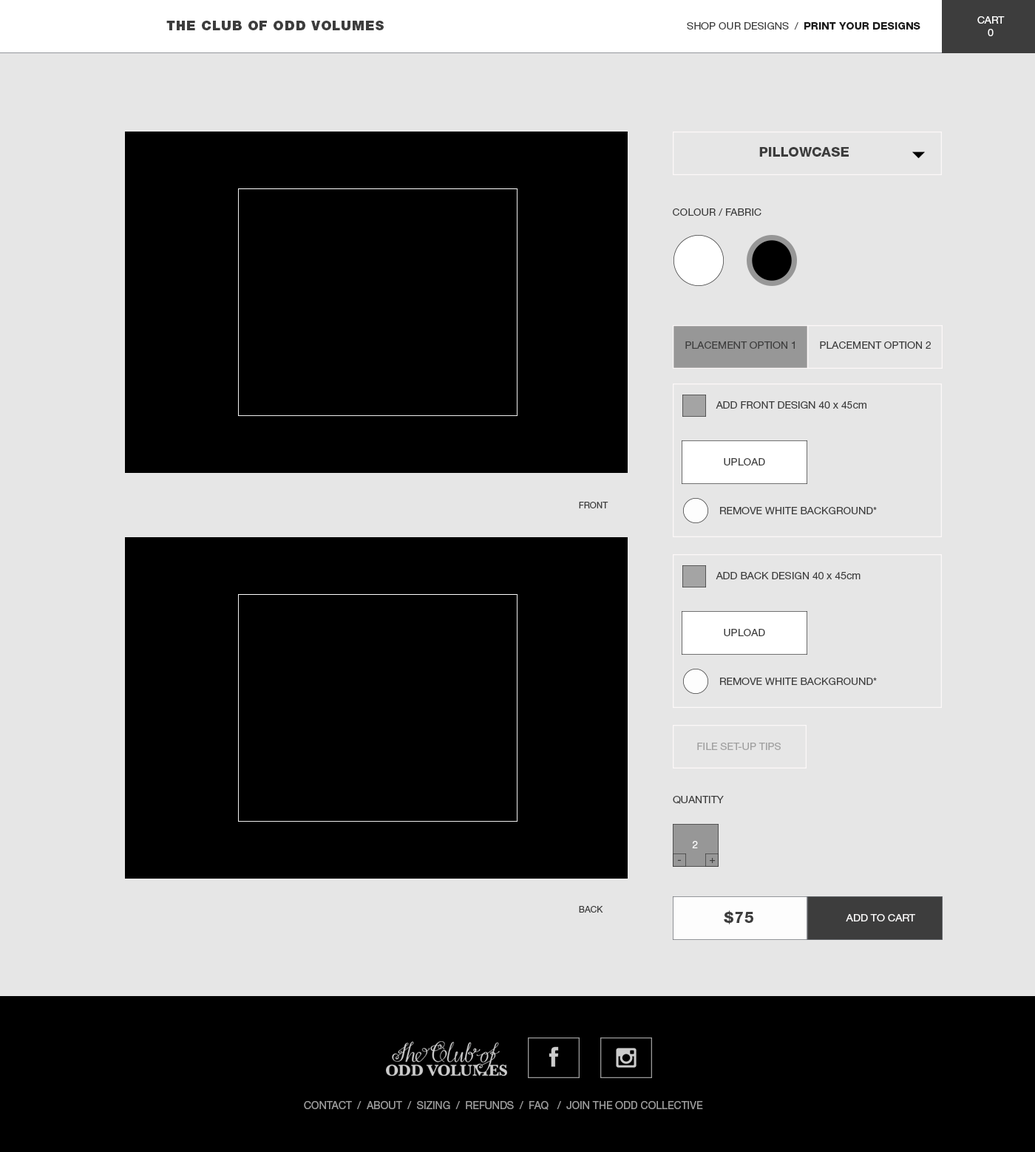
<style>
.page{position:relative;width:1035px;height:1152px;background:#e6e6e6}
.page>*{position:absolute;margin:0}
.t1{font:10.3px "HelveticaNeueLTStd-Roman";color:#ffffff}
.t2{font:13.3px "HelveticaNeueLTStd-Blk";letter-spacing:0.05em;color:#3d3d3d}
.t3{font:10.3px "HelveticaNeueLTStd-Roman";color:#3d3d3d}
.t4{font:10.3px "HelveticaNeueLTStd-Hv";color:#1b1b1b}
.t5{font:13.3px "HelveticaNeueLTStd-Hv";color:#3d3d3d}
.t6{font:10.3px "HelveticaNeueLTStd-Roman";color:#3e3e3e}
.t7{font:8.9px "HelveticaNeueLTStd-Roman";color:#3e3e3e}
.t8{font:10.3px "HelveticaNeueLTStd-Roman";color:#a0a0a0}
.t9{font:10.1px "HelveticaNeueLTStd-Roman";color:#ffffff}
.t10{font:10.1px "HelveticaNeueLTStd-Roman";color:#3e3e3e}
.t11{font:14.8px "HelveticaNeueLTStd-Hv";letter-spacing:0.05em;color:#3d3d3d}
.t12{font:10.3px "HelveticaNeueLTStd-Roman";color:#faf9f9}
.t13{font:10.6px "HelveticaNeueLTStd-Roman";color:#9b9b9b}
</style>
<div class="page">
<p class="t1" style="left:977px;top:16px;width:27px;height:20px;text-align:center">CART<br>0</p>
<p class="t2" style="left:166px;top:21px;width:218px;height:9px">THE CLUB OF ODD VOLUMES</p>
<p class="t3" style="left:687px;top:22px;width:233px;height:8px">SHOP OUR DESIGNS  /  <span class="t4">PRINT YOUR DESIGNS</span></p>
<p class="t5" style="left:759px;top:147px;width:90px;height:10px">PILLOWCASE</p>
<p class="t6" style="left:673px;top:208px;width:88px;height:8px">COLOUR / FABRIC</p>
<p class="t6" style="left:685px;top:341px;width:110px;height:8px">PLACEMENT OPTION 1</p>
<p class="t6" style="left:820px;top:341px;width:111px;height:8px">PLACEMENT OPTION 2</p>
<p class="t6" style="left:715px;top:401px;width:151px;height:8px">ADD FRONT DESIGN 40 x 45cm</p>
<p class="t6" style="left:724px;top:458px;width:41px;height:8px">UPLOAD</p>
<p class="t7" style="left:579px;top:502px;width:29px;height:7px">FRONT</p>
<p class="t6" style="left:720px;top:507px;width:157px;height:7px">REMOVE WHITE BACKGROUND*</p>
<p class="t6" style="left:715px;top:572px;width:145px;height:7px">ADD BACK DESIGN 40 x 45cm</p>
<p class="t6" style="left:724px;top:629px;width:41px;height:7px">UPLOAD</p>
<p class="t6" style="left:720px;top:678px;width:157px;height:7px">REMOVE WHITE BACKGROUND*</p>
<p class="t8" style="left:697px;top:743px;width:84px;height:7px">FILE SET-UP TIPS</p>
<p class="t6" style="left:673px;top:796px;width:51px;height:8px">QUANTITY</p>
<p class="t9" style="left:692px;top:841px;width:6px;height:8px">2</p>
<p class="t10" style="left:677px;top:860px;width:4px;height:1px">-</p>
<p class="t10" style="left:710px;top:858px;width:5px;height:5px">+</p>
<p class="t7" style="left:579px;top:906px;width:24px;height:7px">BACK</p>
<p class="t11" style="left:724px;top:911px;width:29px;height:14px">$75</p>
<p class="t12" style="left:846px;top:914px;width:69px;height:8px">ADD TO CART</p>
<p class="t13" style="left:304px;top:1101px;width:399px;height:9px">CONTACT  /  ABOUT  /  SIZING  /  REFUNDS  /  FAQ   /  JOIN THE ODD COLLECTIVE</p>
</div>
